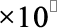
<style>
.page{position:relative;width:57px;height:28px;background:#ffffff}
.page>*{position:absolute;margin:0}
.t1{font:30px "TimesNewRomanPSMT";color:#000000;font-weight:bold;scale:1.04 1}
</style>
<div class="page">
<p class="t1" style="left:0px;top:6px;width:48px;height:22px">×10</p>
</div>
